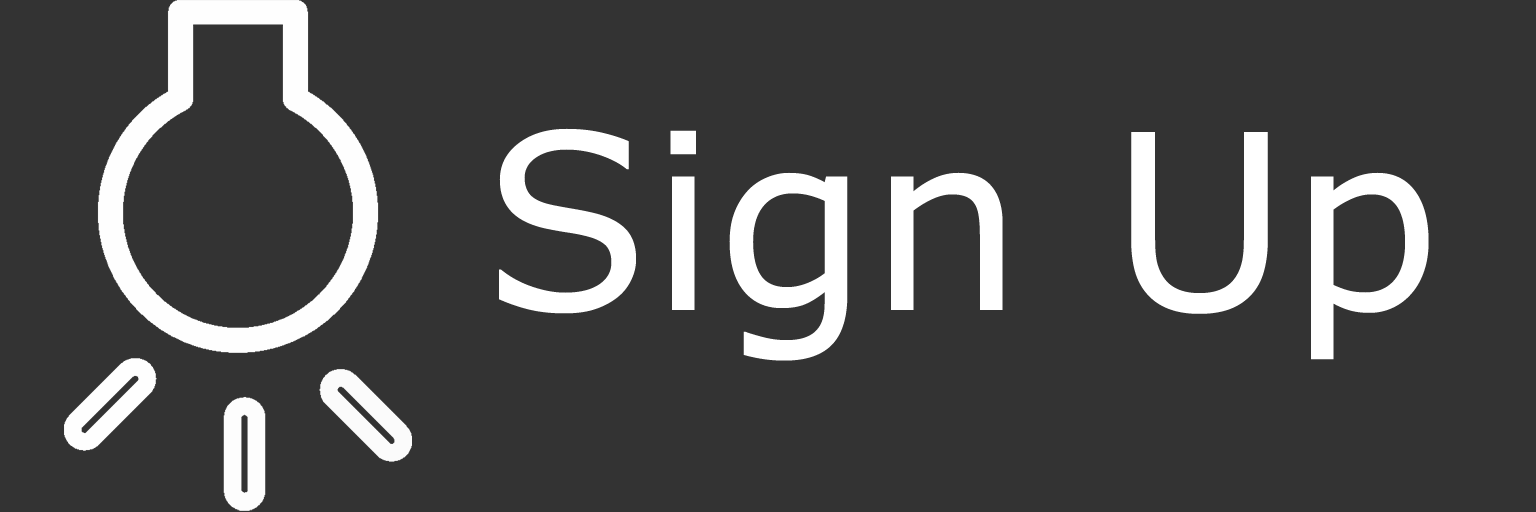
<style>
.page{position:relative;width:1536px;height:512px;background:#333333}
.page>*{position:absolute;margin:0}
.t1{font:244.4px "Verdana";color:#ffffff}
</style>
<div class="page">
<p class="t1" style="left:499px;top:128px;width:930px;height:233px">Sign Up</p>
</div>
